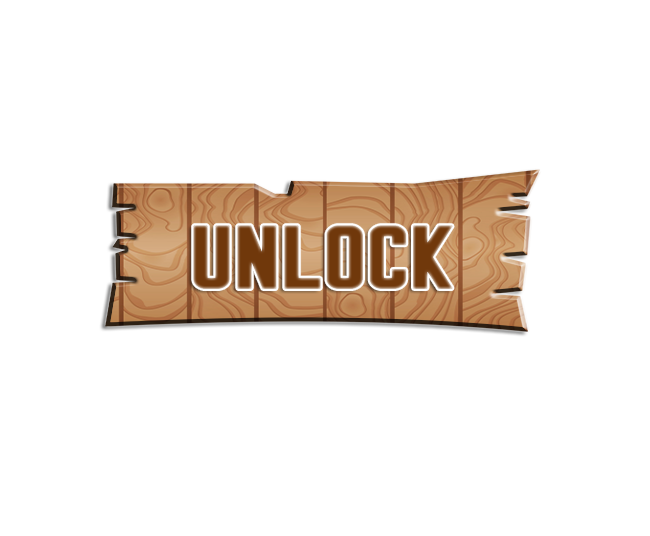
<style>
.page{position:relative;width:650px;height:536px;background:#ffffff}
.page>*{position:absolute;margin:0}
.t1{font:70px "BrewmasterGothicRound";color:#70380b;scale:1.26 1}
</style>
<div class="page">
<p class="t1" style="left:193px;top:225px;width:260px;height:64px">unlock</p>
</div>
